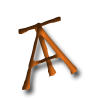
<style>
.page{position:relative;width:100px;height:100px;background:#ffffff}
.page>*{position:absolute;margin:0}
.t1{font:80px "TempusSansITC"}
</style>
<div class="page">
<p class="t1" style="left:18px;top:16px;width:43px;height:61px;rotate:-19deg">T</p>
</div>
